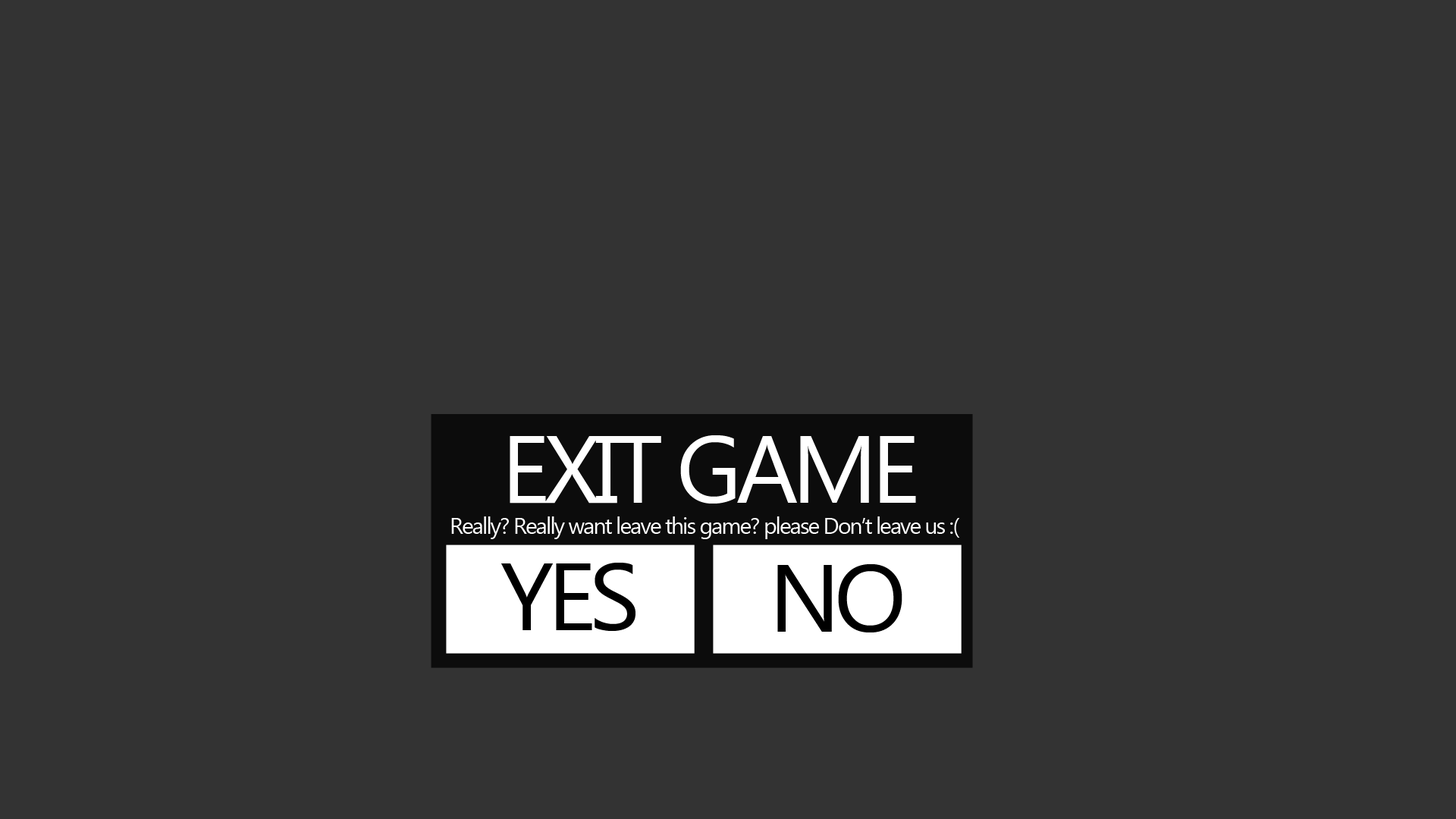
<style>
.page{position:relative;width:1456px;height:819px;background:#333333}
.page>*{position:absolute;margin:0}
.t1{font:95.5px "MyanmarText";letter-spacing:-0.065em;color:#ffffff}
.t2{font:22.7px "MyanmarText";letter-spacing:-0.065em;color:#ffffff}
</style>
<div class="page">
<p class="t1" style="left:510px;top:435px;width:406px;height:69px">EXIT GAME</p>
<p class="t2" style="left:451px;top:516px;width:509px;height:23px">Really? Really want leave this game? please Don’t leave us :(</p>
</div>
